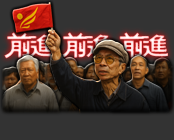
<style>
.page{position:relative;width:174px;height:140px;background:#333333}
.page>*{position:absolute;margin:0}
.t1{font:30.7px "FZZJ-MSHLFW";letter-spacing:-0.2em}
</style>
<div class="page">
<p class="t1" style="left:4px;top:32px;width:164px;height:27px">前进   前进   前进</p>
</div>
